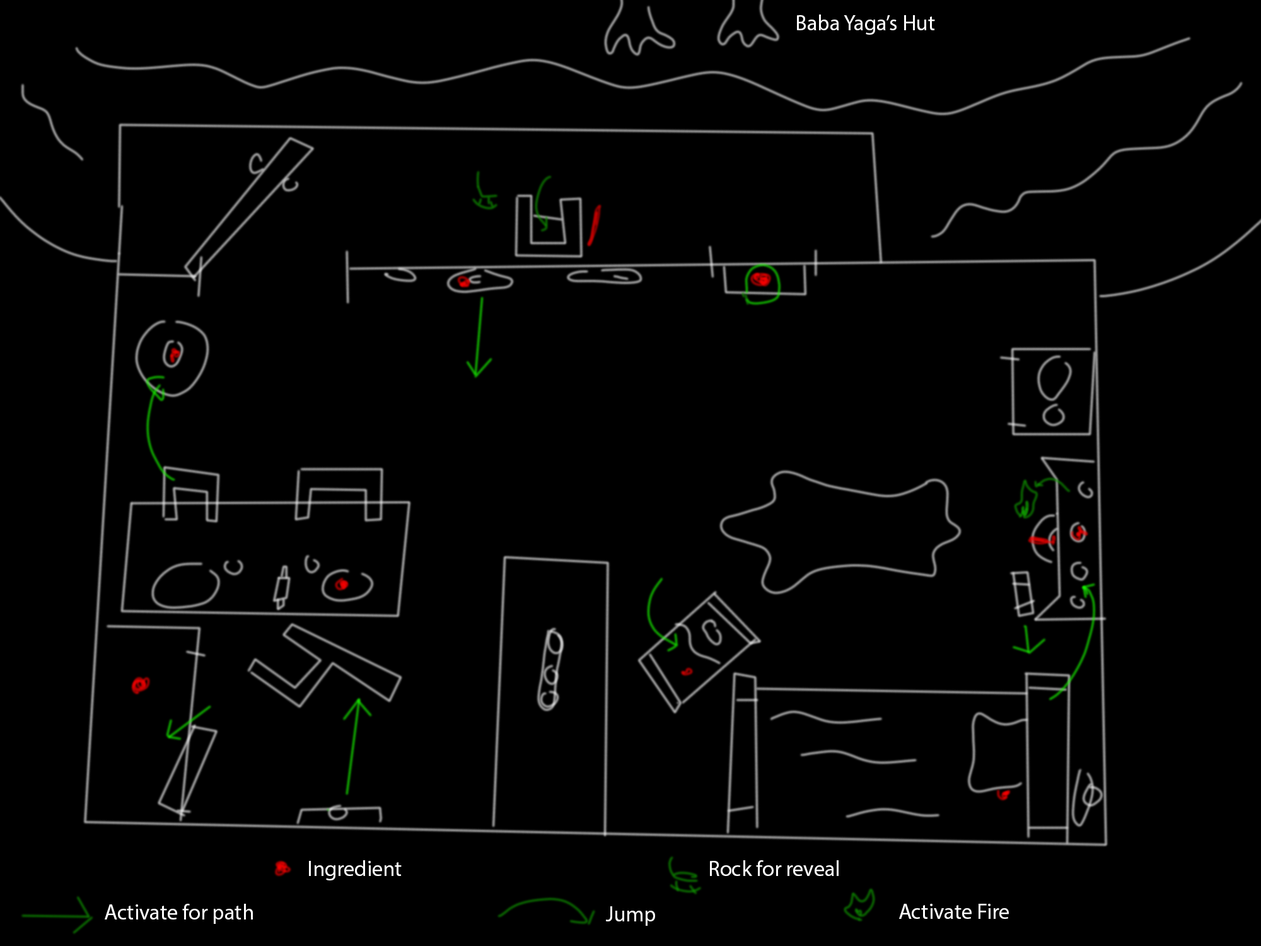
<style>
.page{position:relative;width:1261px;height:946px;background:#000000}
.page>*{position:absolute;margin:0}
.t1{font:21.7px "MyriadPro-Regular";color:#ffffff}
</style>
<div class="page">
<p class="t1" style="left:797px;top:15px;width:138px;height:20px">Baba Yaga’s Hut</p>
<p class="t1" style="left:309px;top:860px;width:93px;height:20px">Ingredient</p>
<p class="t1" style="left:710px;top:860px;width:129px;height:16px">Rock for reveal</p>
<p class="t1" style="left:105px;top:903px;width:148px;height:21px">Activate for path</p>
<p class="t1" style="left:606px;top:906px;width:49px;height:20px">Jump</p>
<p class="t1" style="left:899px;top:903px;width:110px;height:16px">Activate Fire</p>
</div>
